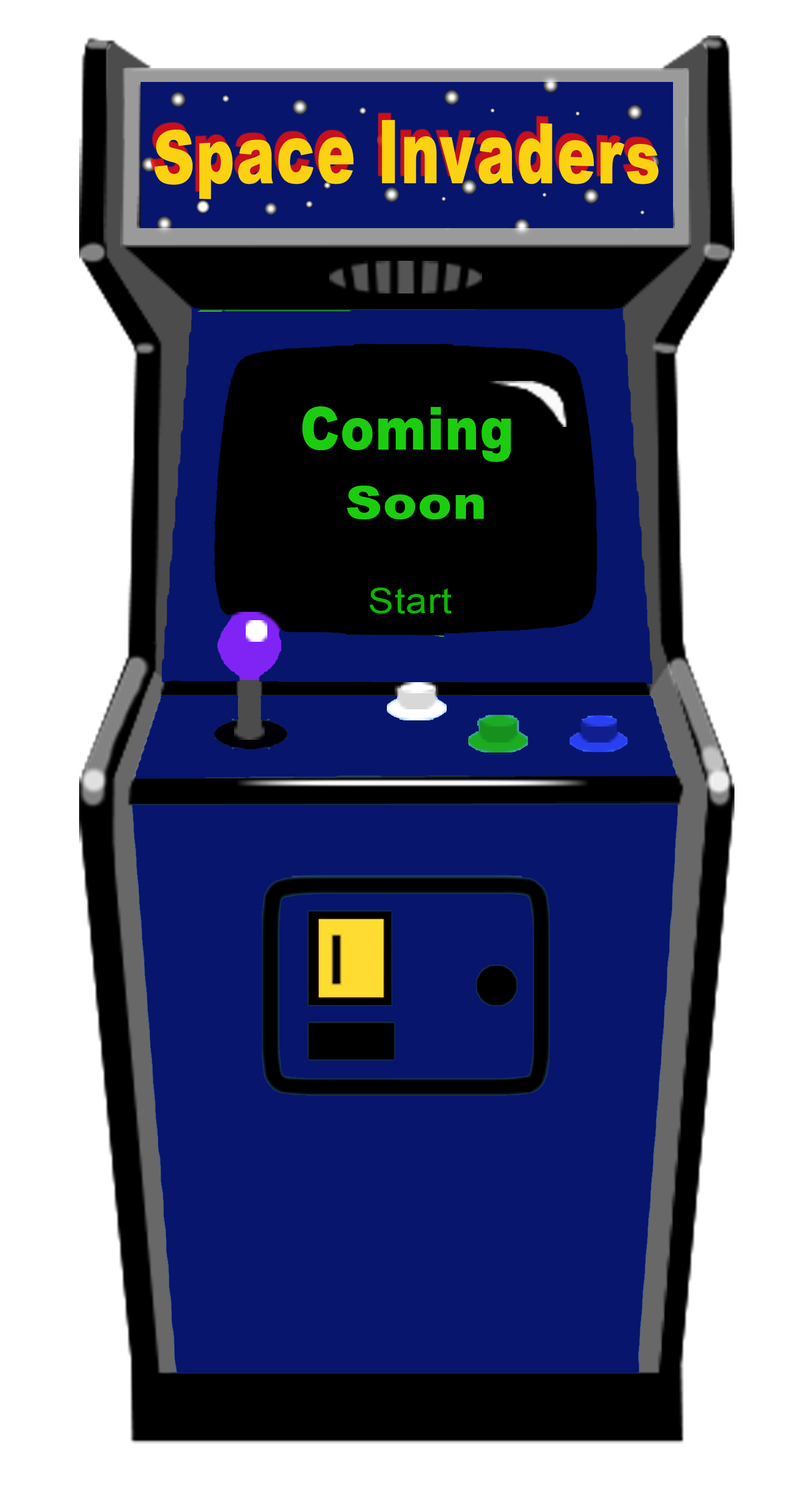
<style>
.page{position:relative;width:797px;height:1495px;background:#07156d}
.page>*{position:absolute;margin:0}
.t1{font:69px "Arial-Black";letter-spacing:0.02em;color:#fbd211;scale:0.85 1}
.t2{font:60px/23.1px "Arial-Black";letter-spacing:0.02em;color:#1ccd0f;scale:0.85 1}
.t3{font:46.2px/23.1px "Arial-Black";letter-spacing:0.02em;color:#1ccd0f;scale:1.1 1}
.t4{font:34.6px "ArialMT";letter-spacing:0.02em;color:#10b404;scale:1.1 1}
</style>
<div class="page">
<p class="t1" style="left:155px;top:120px;width:504px;height:79px">Space Invaders</p>
<p class="t2" style="left:302px;top:406px;width:209px;height:113px;text-align:center">Coming<br><br><br> <span class="t3">Soon</span></p>
<p class="t4" style="left:370px;top:588px;width:82px;height:26px">Start</p>
</div>
